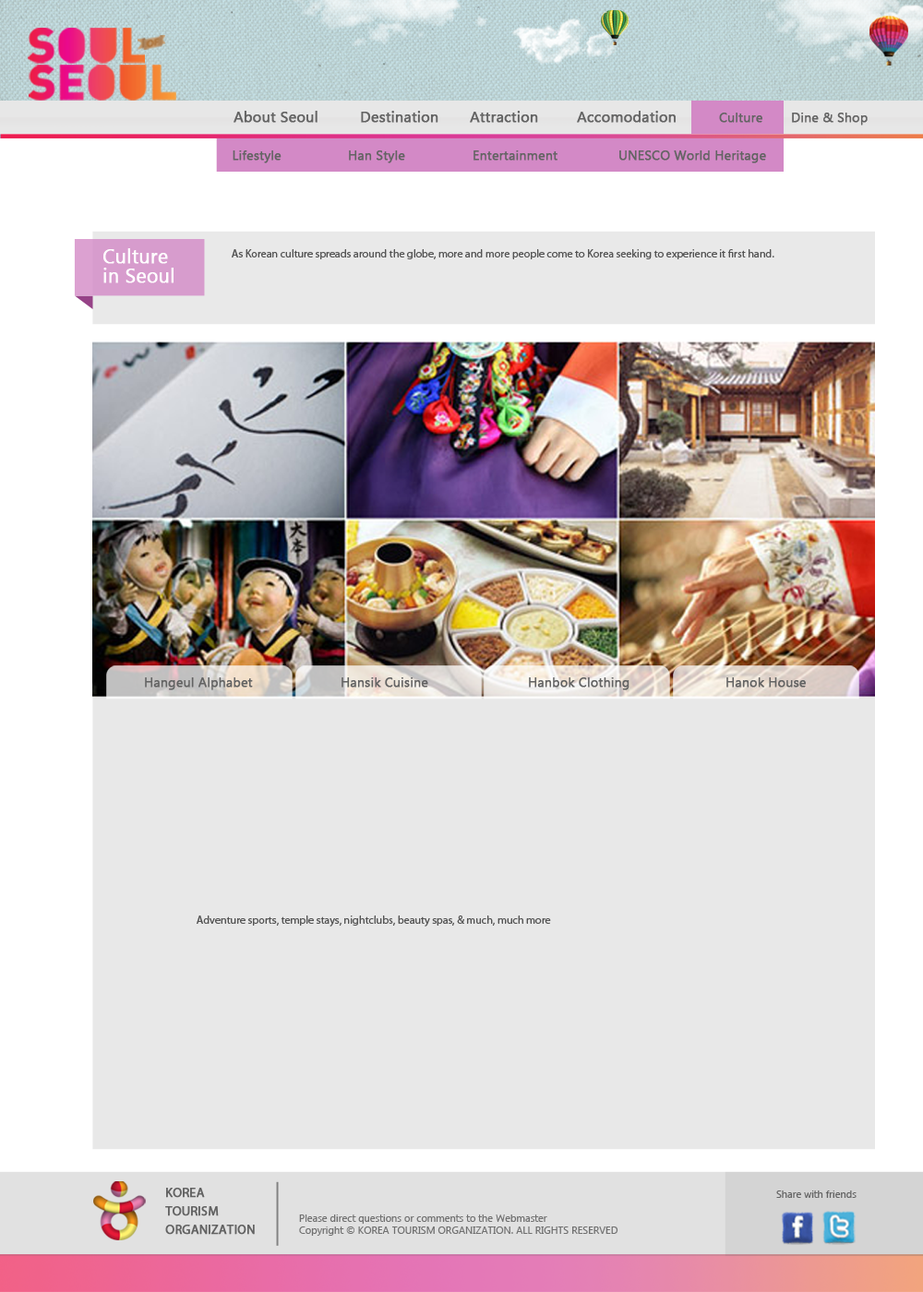
<style>
.page{position:relative;width:923px;height:1292px;background:#e8e8e8}
.page>*{position:absolute;margin:0}
.t1{font:14.8px "SegoeUI";color:#636363;font-weight:bold}
.t2{font:12.9px "SegoeUI";color:#636363;font-weight:bold}
.t3{font:19.4px/19.4px "SegoeUI";color:#ffffff;font-weight:bold}
.t4{font:11.1px "MyriadPro-Regular";color:#555555}
.t5{font:12.9px/18.5px "MyriadPro-Regular";color:#636363;font-weight:bold}
.t6{font:10.2px "SegoeUI";color:#636363}
.t7{font:10.2px "SegoeUI";color:#707070}
</style>
<div class="page">
<p class="t1" style="left:233px;top:111px;width:84px;height:12px">About Seoul</p>
<p class="t1" style="left:361px;top:111px;width:77px;height:12px">Destination</p>
<p class="t1" style="left:470px;top:111px;width:68px;height:12px">Attraction</p>
<p class="t1" style="left:577px;top:111px;width:99px;height:12px">Accomodation</p>
<p class="t2" style="left:719px;top:113px;width:43px;height:10px">Culture</p>
<p class="t2" style="left:792px;top:113px;width:76px;height:13px">Dine &amp; Shop</p>
<p class="t2" style="left:233px;top:150px;width:48px;height:13px">Lifestyle</p>
<p class="t2" style="left:349px;top:150px;width:56px;height:13px">Han Style</p>
<p class="t2" style="left:473px;top:150px;width:84px;height:11px">Entertainment</p>
<p class="t2" style="left:619px;top:150px;width:147px;height:13px">UNESCO World Heritage</p>
<p class="t3" style="left:103px;top:248px;width:71px;height:35px">Culture<br>in Seoul</p>
<p class="t4" style="left:232px;top:249px;width:542px;height:10px">As Korean culture spreads around the globe, more and more people come to Korea seeking to experience it first hand.</p>
<p class="t2" style="left:145px;top:677px;width:108px;height:13px">Hangeul Alphabet</p>
<p class="t2" style="left:341px;top:677px;width:87px;height:11px">Hansik Cuisine</p>
<p class="t2" style="left:529px;top:677px;width:100px;height:13px">Hanbok Clothing</p>
<p class="t2" style="left:726px;top:677px;width:80px;height:11px">Hanok House</p>
<p class="t4" style="left:197px;top:916px;width:354px;height:11px">Adventure sports, temple stays, nightclubs, beauty spas, &amp; much, much more</p>
<p class="t5" style="left:165px;top:1188px;width:90px;height:47px">KOREA<br>TOURISM<br>ORGANIZATION</p>
<p class="t6" style="left:776px;top:1191px;width:80px;height:7px">Share with friends</p>
<p class="t7" style="left:299px;top:1215px;width:319px;height:21px">Please direct questions or comments to the Webmaster<br>Copyright © KOREA TOURISM ORGANIZATION. ALL RIGHTS RESERVED</p>
</div>
